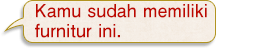
<style>
.page{position:relative;width:267px;height:48px;background:#ffffff}
.page>*{position:absolute;margin:0}
.t1{font:18px/20px "FutoGoB101Pr5-Bold";color:#bd0800}
</style>
<div class="page">
<p class="t1" style="left:35px;top:4px;width:172px;height:34px">Kamu sudah memiliki<br>furnitur ini.</p>
</div>
